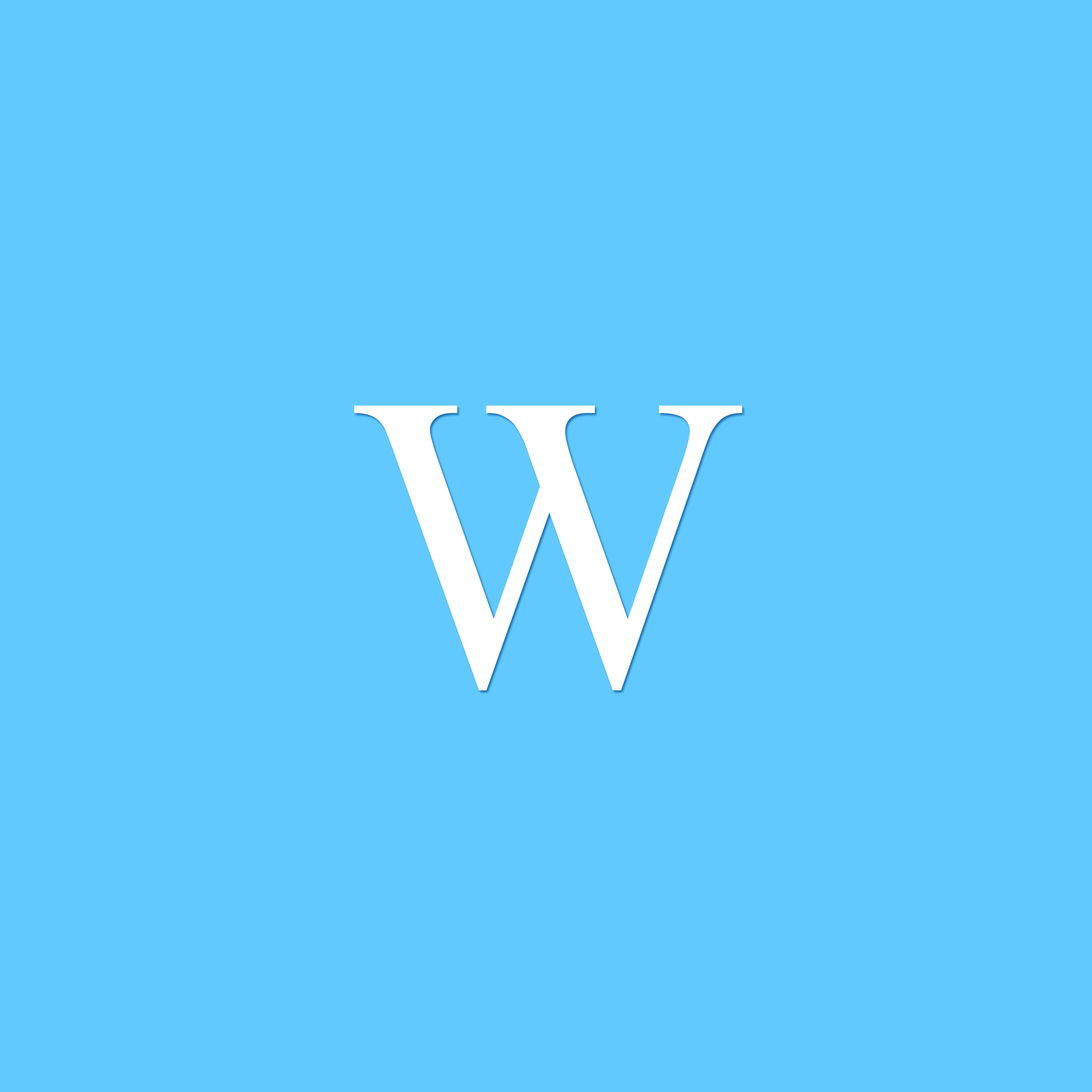
<style>
.page{position:relative;width:1092px;height:1092px;background:#62c9ff}
.page>*{position:absolute;margin:0}
.t1{font:420.4px "TimesNewRomanPSMT";color:#ffffff}
</style>
<div class="page">
<p class="t1" style="left:354px;top:406px;width:388px;height:284px">W</p>
</div>
